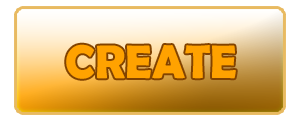
<style>
.page{position:relative;width:300px;height:120px}
.page>*{position:absolute;margin:0}
.t1{font:47.6px "BerlinSansFBDemi-Bold";color:#ffa200}
</style>
<div class="page">
<p class="t1" style="left:66px;top:44px;width:170px;height:35px">CREATE</p>
</div>
